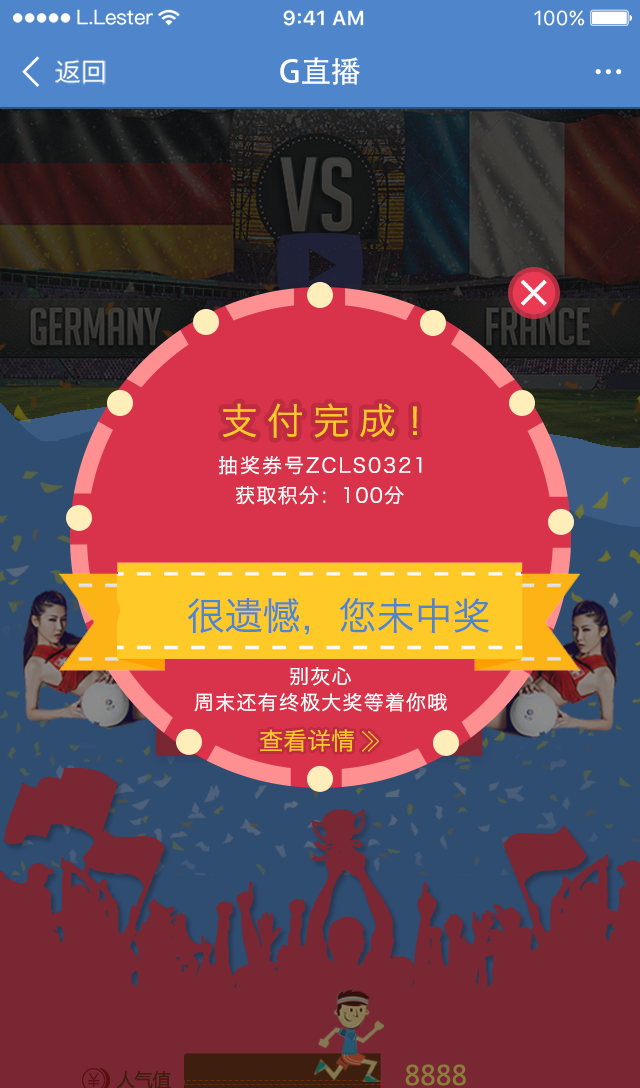
<style>
.page{position:relative;width:640px;height:1088px}
.page>*{position:absolute;margin:0}
.t1{font:25.6px "SourceHanSansCN-Regular";color:#ffffff}
.t2{font:30.7px "AdobeHeitiStd-Regular";color:#ffffff}
.t3{font:37.2px "HiraginoSansGB-W3";letter-spacing:0.24em;color:#ffc928}
.t4{font:37.2px "HiraginoSansGB-W3";color:#ffc928}
.t5{font:20px "HiraginoSansGB-W3";letter-spacing:0.1em;color:#ffffff}
.t6{font:20px "HiraginoSansGB-W3";letter-spacing:0.06em;color:#ffffff}
.t7{font:38px "HiraginoSansGB-W3";color:#4e85cb}
.t8{font:24px "HiraginoSansGB-W3";color:#ffc928}
</style>
<div class="page">
<p class="t1" style="left:55px;top:58px;width:51px;height:27px">返回</p>
<p class="t2" style="left:280px;top:57px;width:80px;height:28px">G直播</p>
<p class="t3" style="left:222px;top:403px;width:195px;height:35px"><span class="t4">   </span>支付完成！</p>
<p class="t5" style="left:218px;top:456px;width:204px;height:19px">抽奖券号ZCLS0321</p>
<p class="t6" style="left:236px;top:486px;width:168px;height:19px">获取积分：100分</p>
<p class="t7" style="left:188px;top:598px;width:301px;height:37px">很遗憾，您未中奖</p>
<p class="t6" style="left:290px;top:667px;width:61px;height:19px">别灰心</p>
<p class="t6" style="left:194px;top:692px;width:253px;height:20px">周末还有终极大奖等着你哦</p>
<p class="t8" style="left:260px;top:729px;width:94px;height:23px">查看详情</p>
</div>
